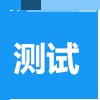
<style>
.page{position:relative;width:100px;height:100px;background:#1699f5}
.page>*{position:absolute;margin:0}
.t1{font:26px "MicrosoftYaHei-Bold";color:#f9f9f9}
.t2{font:33.3px "MicrosoftYaHei-Bold";color:#ffffff}
</style>
<div class="page">
<p class="t1" style="left:24px;top:36px;width:52px;height:26px">按钮</p>
<p class="t2" style="left:13px;top:42px;width:67px;height:33px">测试</p>
</div>
